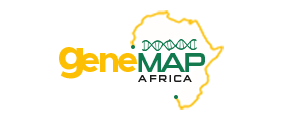
<style>
.page{position:relative;width:300px;height:120px;background:#ffffff}
.page>*{position:absolute;margin:0}
.t1{font:44.3px "Metropolis-Bold";letter-spacing:-0.09em;color:#fdbf04}
.t2{font:36.6px "Metropolis-Bold";letter-spacing:-0.09em;color:#fdbf04}
.t3{font:27.8px "SuiGenerisRg-Regular";letter-spacing:-0.09em;color:#11794e;text-transform:uppercase}
.t4{font:9.6px "SuiGenerisRg-Regular";letter-spacing:0.21em;color:#1b1b1b}
</style>
<div class="page">
<p class="t1" style="left:59px;top:47px;width:24px;height:32px">g</p>
<p class="t2" style="left:80px;top:53px;width:19px;height:19px">e</p>
<p class="t2" style="left:100px;top:53px;width:18px;height:19px">n</p>
<p class="t2" style="left:118px;top:53px;width:19px;height:19px">e</p>
<p class="t3" style="left:138px;top:53px;width:67px;height:19px">map</p>
<p class="t4" style="left:138px;top:75px;width:54px;height:7px">AFRICA</p>
</div>
